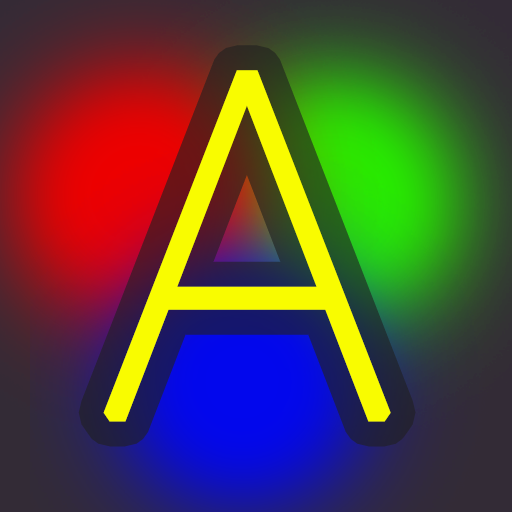
<style>
.page{position:relative;width:512px;height:512px}
.page>*{position:absolute;margin:0}
.t1{font:473.8px "AktivGrotesk-Hairline";letter-spacing:0.07em;color:#f9fc01;font-weight:bold}
</style>
<div class="page">
<p class="t1" style="left:103px;top:70px;width:288px;height:352px">A</p>
</div>
